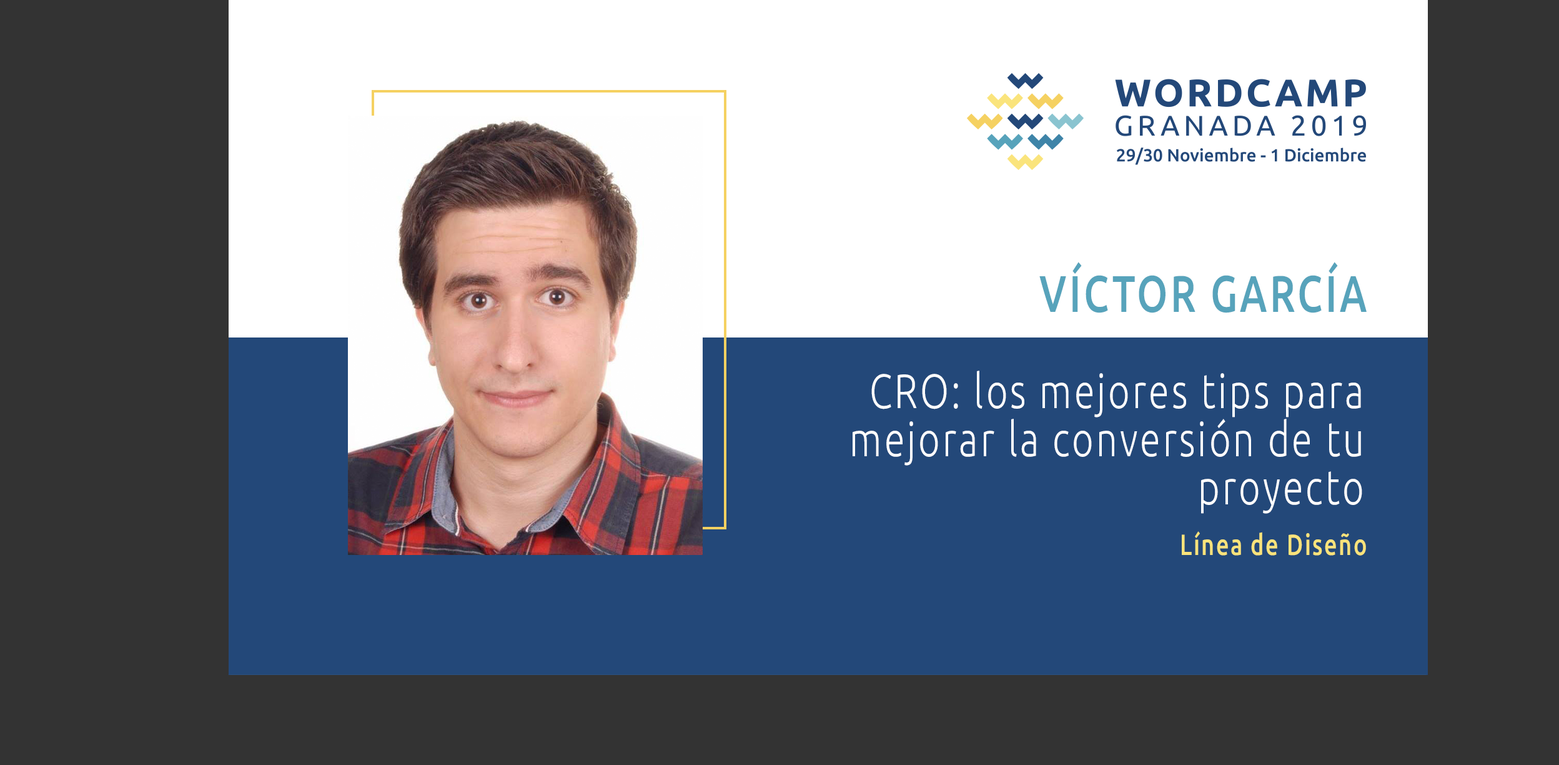
<style>
.page{position:relative;width:1559px;height:765px;background:#333333}
.page>*{position:absolute;margin:0}
.t1{font:51.4px "Ubuntu-Medium";letter-spacing:0.068em;color:#57a3bb;text-transform:uppercase;scale:0.77 1}
.t2{font:48.2px/48.2px "Ubuntu-Light";letter-spacing:0.068em;color:#ffffff;scale:0.77 1}
.t3{font:29.2px "Ubuntu-Medium";letter-spacing:0.068em;color:#f9e37b;scale:0.77 1}
</style>
<div class="page">
<p class="t1" style="left:1040px;top:262px;width:327px;height:51px">Víctor García</p>
<p class="t2" style="left:853px;top:370px;width:510px;height:144px;text-align:right">CRO: los mejores tips para mejorar la conversión de tu proyecto</p>
<p class="t3" style="left:1182px;top:531px;width:184px;height:24px">Línea de Diseño</p>
</div>
